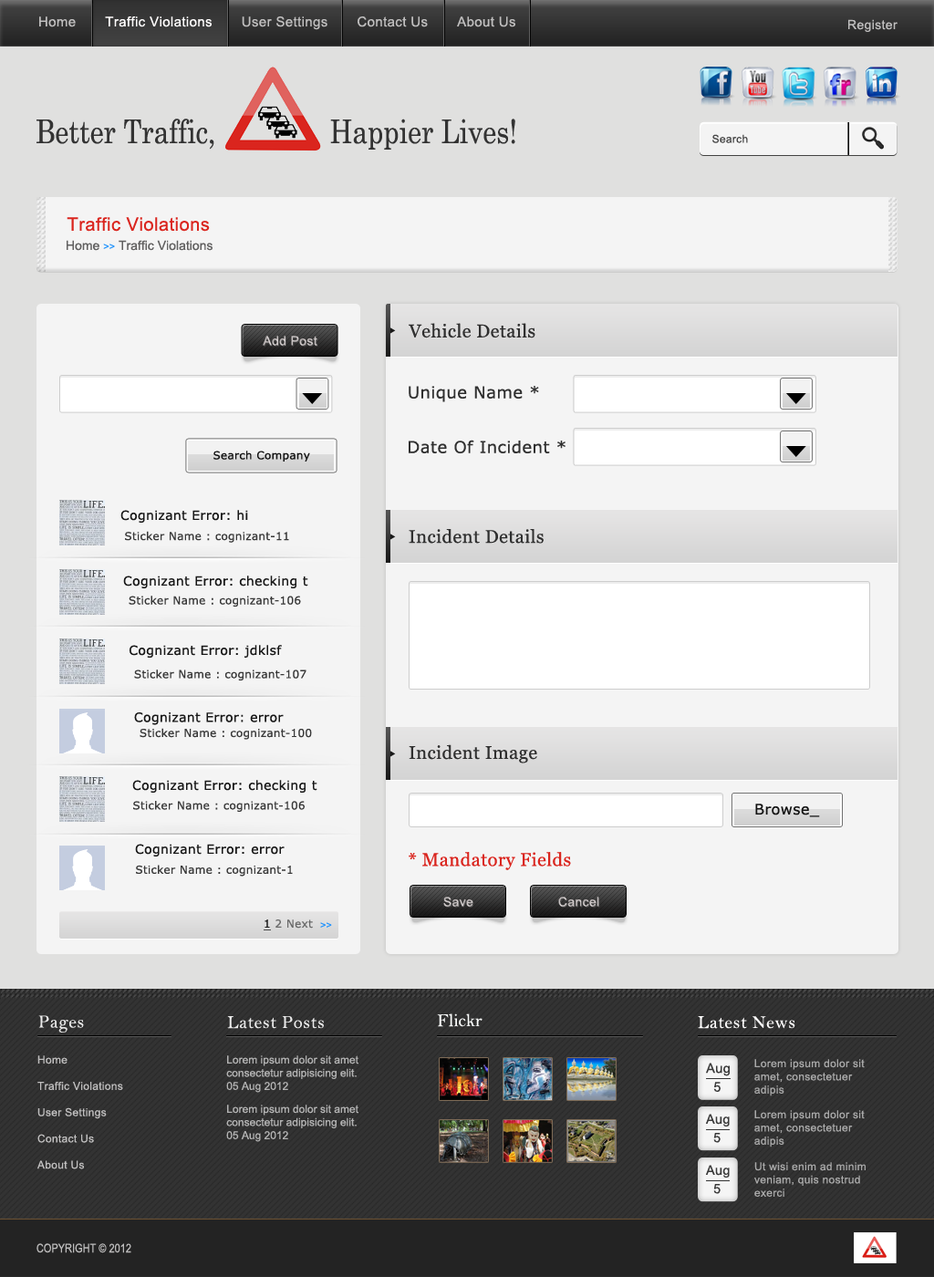
<style>
.page{position:relative;width:934px;height:1277px;background:#f4f4f4}
.page>*{position:absolute;margin:0}
.t1{font:13.7px "ArialMT";letter-spacing:0.025em;color:#c0bfbf}
.t2{font:13.7px "ArialMT";letter-spacing:0.025em;color:#fffdfd}
.t3{font:12.8px "ArialMT";letter-spacing:0.025em;color:#c0bfbf}
.t4{font:32.8px "Century";color:#333333;scale:0.83 1}
.t5{font:10.9px "ArialMT";letter-spacing:0.025em;color:#474747}
.t6{font:18.2px "ArialMT";letter-spacing:0.025em;color:#da251e}
.t7{font:12.8px "ArialMT";color:#605f5f}
.t8{font:10px "ArialMT";color:#2695fc}
.t9{font:18.2px "Georgia";letter-spacing:0.025em;color:#2f2f2f}
.t10{font:12.8px "ArialMT";letter-spacing:0.025em;color:#cac4c4}
.t11{font:16.4px "Verdana";letter-spacing:0.025em;color:#2f2f2f}
.t12{font:10.9px "Verdana";letter-spacing:0.025em;color:#131313}
.t13{font:12.8px "Verdana";letter-spacing:0.025em;color:#171717}
.t14{font:10.9px "Verdana";letter-spacing:0.025em;color:#383838}
.t15{font:14.6px "Verdana";letter-spacing:0.025em;color:#131313}
.t16{font:18.2px "Georgia";letter-spacing:0.025em;color:#da251e}
.t17{font:12.8px "ArialMT";letter-spacing:0.025em;color:#c4bebe}
.t18{font:12.8px "ArialMT";letter-spacing:0.025em;color:#c2bdbd}
.t19{font:10.9px "Verdana";letter-spacing:0.025em;color:#6a6a6a}
.t20{font:10.9px "Verdana";letter-spacing:0.025em;color:#1c1c1c;text-decoration:underline}
.t21{font:18.2px "BellMT";color:#fbfdfc}
.t22{font:18.2px "BellMT";letter-spacing:0.025em;color:#eaeaea}
.t23{font:18.2px "BellMT";letter-spacing:0.025em;color:#fdfcfc}
.t24{font:10.9px "ArialMT";letter-spacing:0.025em;color:#c0bfbf}
.t25{font:10.9px "ArialMT";color:#b4b4b4}
.t26{font:10.9px "ArialMT";letter-spacing:0.025em;color:#a9a9a9}
.t27{font:13.3px "ArialMT";letter-spacing:0.025em;color:#3a3a3a}
.t28{font:13.2px "ArialMT";letter-spacing:0.025em;color:#3a3a3a}
.t29{font:12px "ArialMT";color:#bdbcbc;scale:0.83 1}
</style>
<div class="page">
<p class="t1" style="left:39px;top:16px;width:476px;height:14px">Home       <span class="t2">Traffic Violations</span>       User Settings       Contact Us       About Us</p>
<p class="t3" style="left:848px;top:19px;width:49px;height:13px">Register</p>
<p class="t4" style="left:36px;top:119px;width:479px;height:31px">Better Traffic,               Happier Lives!</p>
<p class="t5" style="left:712px;top:134px;width:36px;height:9px">Search</p>
<p class="t6" style="left:67px;top:217px;width:143px;height:15px">Traffic Violations</p>
<p class="t7" style="left:67px;top:240px;width:145px;height:11px">Home <span class="t8">&gt;&gt; </span>Traffic Violations</p>
<p class="t9" style="left:409px;top:323px;width:126px;height:15px">Vehicle Details</p>
<p class="t10" style="left:263px;top:336px;width:54px;height:10px">Add Post</p>
<p class="t11" style="left:409px;top:386px;width:130px;height:16px">Unique Name *</p>
<p class="t11" style="left:409px;top:440px;width:156px;height:13px">Date Of Incident *</p>
<p class="t12" style="left:213px;top:451px;width:97px;height:10px">Search Company</p>
<p class="t13" style="left:120px;top:510px;width:128px;height:13px">Cognizant Error: hi</p>
<p class="t14" style="left:125px;top:531px;width:164px;height:12px">Sticker Name : cognizant-11</p>
<p class="t9" style="left:409px;top:529px;width:135px;height:15px">Incident Details</p>
<p class="t13" style="left:123px;top:575px;width:185px;height:13px">Cognizant Error: checking t</p>
<p class="t14" style="left:129px;top:596px;width:172px;height:11px">Sticker Name : cognizant-106</p>
<p class="t13" style="left:130px;top:645px;width:152px;height:13px">Cognizant Error: jdklsf</p>
<p class="t14" style="left:134px;top:669px;width:172px;height:11px">Sticker Name : cognizant-107</p>
<p class="t13" style="left:134px;top:712px;width:150px;height:13px">Cognizant Error: error</p>
<p class="t14" style="left:140px;top:728px;width:172px;height:12px">Sticker Name : cognizant-100</p>
<p class="t9" style="left:409px;top:744px;width:128px;height:19px">Incident Image</p>
<p class="t13" style="left:132px;top:780px;width:185px;height:13px">Cognizant Error: checking t</p>
<p class="t14" style="left:133px;top:801px;width:172px;height:11px">Sticker Name : cognizant-106</p>
<p class="t15" style="left:755px;top:803px;width:65px;height:14px">Browse_</p>
<p class="t13" style="left:135px;top:844px;width:150px;height:12px">Cognizant Error: error</p>
<p class="t16" style="left:409px;top:852px;width:162px;height:18px">* Mandatory Fields</p>
<p class="t14" style="left:136px;top:865px;width:157px;height:11px">Sticker Name : cognizant-1</p>
<p class="t17" style="left:443px;top:897px;width:30px;height:10px">Save</p>
<p class="t18" style="left:558px;top:897px;width:41px;height:10px">Cancel</p>
<p class="t19" style="left:264px;top:919px;width:49px;height:11px"><span class="t20">1 </span>2 Next</p>
<p class="t8" style="left:320px;top:922px;width:12px;height:6px">&gt;&gt;</p>
<p class="t21" style="left:437px;top:1013px;width:45px;height:14px">Flickr</p>
<p class="t22" style="left:38px;top:1015px;width:46px;height:17px">Pages</p>
<p class="t22" style="left:227px;top:1016px;width:97px;height:13px">Latest Posts</p>
<p class="t23" style="left:698px;top:1016px;width:97px;height:13px">Latest News</p>
<p class="t24" style="left:36px;top:1055px;width:87px;height:114px">Home<br>       <br>Traffic Violations<br>      <br>User Settings<br>       <br>Contact Us<br>      <br>About Us</p>
<p class="t25" style="left:226px;top:1055px;width:132px;height:38px">Lorem ipsum dolor sit amet <br>consectetur adipisicing elit.<br>05 Aug 2012</p>
<p class="t26" style="left:754px;top:1059px;width:111px;height:37px">Lorem ipsum dolor sit <br>amet, consectetuer <br>adipis</p>
<p class="t27" style="left:706px;top:1062px;width:24px;height:14px">Aug</p>
<p class="t27" style="left:713px;top:1082px;width:7px;height:10px">5</p>
<p class="t25" style="left:226px;top:1104px;width:132px;height:38px">Lorem ipsum dolor sit amet <br>consectetur adipisicing elit.<br>05 Aug 2012</p>
<p class="t26" style="left:754px;top:1110px;width:111px;height:37px">Lorem ipsum dolor sit <br>amet, consectetuer <br>adipis</p>
<p class="t28" style="left:706px;top:1114px;width:24px;height:12px">Aug</p>
<p class="t28" style="left:713px;top:1133px;width:7px;height:10px">5</p>
<p class="t28" style="left:706px;top:1165px;width:24px;height:12px">Aug</p>
<p class="t26" style="left:754px;top:1162px;width:112px;height:35px">Ut wisi enim ad minim <br>veniam, quis nostrud <br>exerci</p>
<p class="t28" style="left:713px;top:1184px;width:7px;height:10px">5</p>
<p class="t29" style="left:36px;top:1243px;width:95px;height:10px">COPYRIGHT © 2012</p>
</div>
